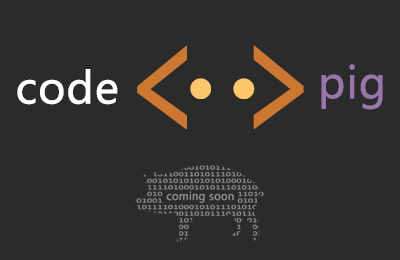
<style>
.page{position:relative;width:400px;height:260px;background:#2b2b2b}
.page>*{position:absolute;margin:0}
.t1{font:160.5px "MicrosoftYaHei";color:#cc7832;font-weight:bold;scale:0.66 1}
.t2{font:42.7px "MicrosoftYaHei";color:#9876aa;font-weight:bold}
.t3{font:42.7px "MicrosoftYaHei";color:#ffffff;font-weight:bold}
.t4{font:66.3px "BerlinSansFB-Bold";color:#ffc66d;font-weight:bold}
</style>
<div class="page">
<p class="t1" style="left:137px;top:45px;width:167px;height:85px">&lt; &gt;</p>
<p class="t2" style="left:321px;top:64px;width:62px;height:46px">pig</p>
<p class="t3" style="left:17px;top:69px;width:101px;height:36px">code</p>
<p class="t4" style="left:190px;top:78px;width:65px;height:21px">. .</p>
</div>
